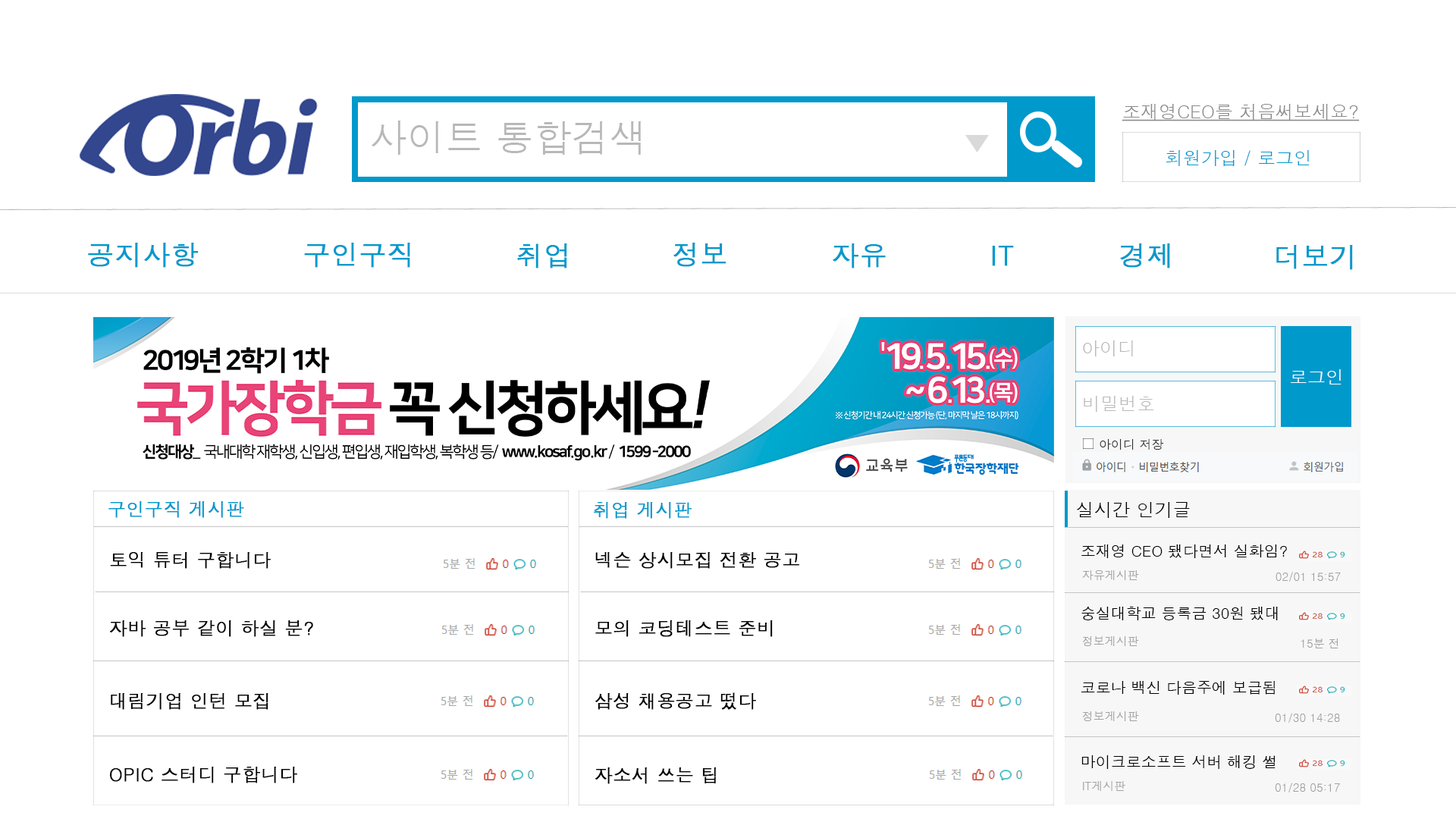
<style>
.page{position:relative;width:1456px;height:819px;background:#ffffff}
.page>*{position:absolute;margin:0}
.t1{font:18.2px "Dotum";color:#8a8a8a;text-decoration:underline}
.t2{font:37.9px "Dotum";color:#b8b8b8}
.t3{font:18.2px "Dotum";color:#0099cc}
.t4{font:27.3px "Dotum";color:#0099cc;font-weight:bold}
.t5{font:18.2px "Dotum";color:#b8b8b8}
.t6{font:18.2px "Dotum";color:#ffffff}
.t7{font:18.2px "Dotum";color:#bbbbbb}
.t8{font:12.1px "Dotum";color:#303030}
.t9{font:18.2px "Dotum";color:#0099cc;font-weight:bold}
.t10{font:18.2px "Dotum";color:#000000}
.t11{font:15.2px "Dotum";color:#000000}
.t12{font:18.2px "Dotum";color:#000000;font-weight:bold}
.t13{font:11.4px "Dotum";color:#a1a1a1}
</style>
<div class="page">
<p class="t1" style="left:1122px;top:104px;width:238px;height:17px">조재영CEO를 처음써보세요?</p>
<p class="t2" style="left:372px;top:121px;width:270px;height:34px">사이트 통합검색</p>
<p class="t3" style="left:1166px;top:150px;width:144px;height:16px">회원가입 / 로그인</p>
<p class="t4" style="left:88px;top:243px;width:111px;height:25px">공지사항</p>
<p class="t4" style="left:304px;top:243px;width:106px;height:25px">구인구직</p>
<p class="t4" style="left:517px;top:243px;width:50px;height:25px">취업</p>
<p class="t4" style="left:673px;top:243px;width:53px;height:24px">정보</p>
<p class="t4" style="left:833px;top:243px;width:53px;height:25px">자유</p>
<p class="t4" style="left:992px;top:246px;width:22px;height:20px">IT</p>
<p class="t4" style="left:1120px;top:243px;width:50px;height:25px">경제</p>
<p class="t4" style="left:1276px;top:245px;width:77px;height:25px">더보기</p>
<p class="t5" style="left:1083px;top:340px;width:50px;height:16px">아이디</p>
<p class="t6" style="left:1291px;top:369px;width:50px;height:15px">로그인</p>
<p class="t7" style="left:1084px;top:396px;width:70px;height:16px">비밀번호</p>
<p class="t8" style="left:1100px;top:439px;width:64px;height:11px">아이디 저장</p>
<p class="t9" style="left:108px;top:501px;width:136px;height:17px">구인구직 게시판</p>
<p class="t9" style="left:594px;top:502px;width:98px;height:17px">취업 게시판</p>
<p class="t10" style="left:1076px;top:502px;width:114px;height:16px">실시간 인기글</p>
<p class="t11" style="left:1081px;top:544px;width:206px;height:14px">조재영 CEO 됐다면서 실화임?</p>
<p class="t12" style="left:110px;top:552px;width:161px;height:17px">토익 튜터 구합니다</p>
<p class="t12" style="left:595px;top:552px;width:204px;height:17px">넥슨 상시모집 전환 공고</p>
<p class="t13" style="left:1082px;top:570px;width:57px;height:10px">자유게시판</p>
<p class="t13" style="left:1275px;top:572px;width:66px;height:10px">02/01 15:57</p>
<p class="t11" style="left:1081px;top:607px;width:197px;height:13px">숭실대학교 등록금 30원 됐대</p>
<p class="t12" style="left:110px;top:620px;width:203px;height:17px">자바 공부 같이 하실 분?</p>
<p class="t12" style="left:595px;top:620px;width:178px;height:17px">모의 코딩테스트 준비</p>
<p class="t13" style="left:1082px;top:636px;width:57px;height:10px">정보게시판</p>
<p class="t13" style="left:1301px;top:639px;width:37px;height:9px">15분 전</p>
<p class="t11" style="left:1081px;top:681px;width:194px;height:14px">코로나 백신 다음주에 보급됨</p>
<p class="t12" style="left:111px;top:693px;width:157px;height:17px">대림기업 인턴 모집</p>
<p class="t12" style="left:595px;top:692px;width:161px;height:18px">삼성 채용공고 떴다</p>
<p class="t13" style="left:1082px;top:711px;width:57px;height:10px">정보게시판</p>
<p class="t13" style="left:1275px;top:713px;width:65px;height:10px">01/30 14:28</p>
<p class="t11" style="left:1081px;top:755px;width:194px;height:14px">마이크로소프트 서버 해킹 썰</p>
<p class="t12" style="left:109px;top:767px;width:188px;height:16px">OPIC 스터디 구합니다</p>
<p class="t12" style="left:595px;top:767px;width:122px;height:17px">자소서 쓰는 팁</p>
<p class="t13" style="left:1083px;top:781px;width:42px;height:10px">IT게시판</p>
<p class="t13" style="left:1275px;top:783px;width:65px;height:9px">01/28 05:17</p>
</div>
